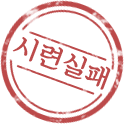
<style>
.page{position:relative;width:124px;height:124px;background:#ffffff}
.page>*{position:absolute;margin:0}
.t1{font:27px "SDKukdetopokki-aLt";letter-spacing:0.02em;color:#bc4a4a}
</style>
<div class="page">
<p class="t1" style="left:12px;top:37px;width:99px;height:53px;rotate:21deg">시련실패</p>
</div>
